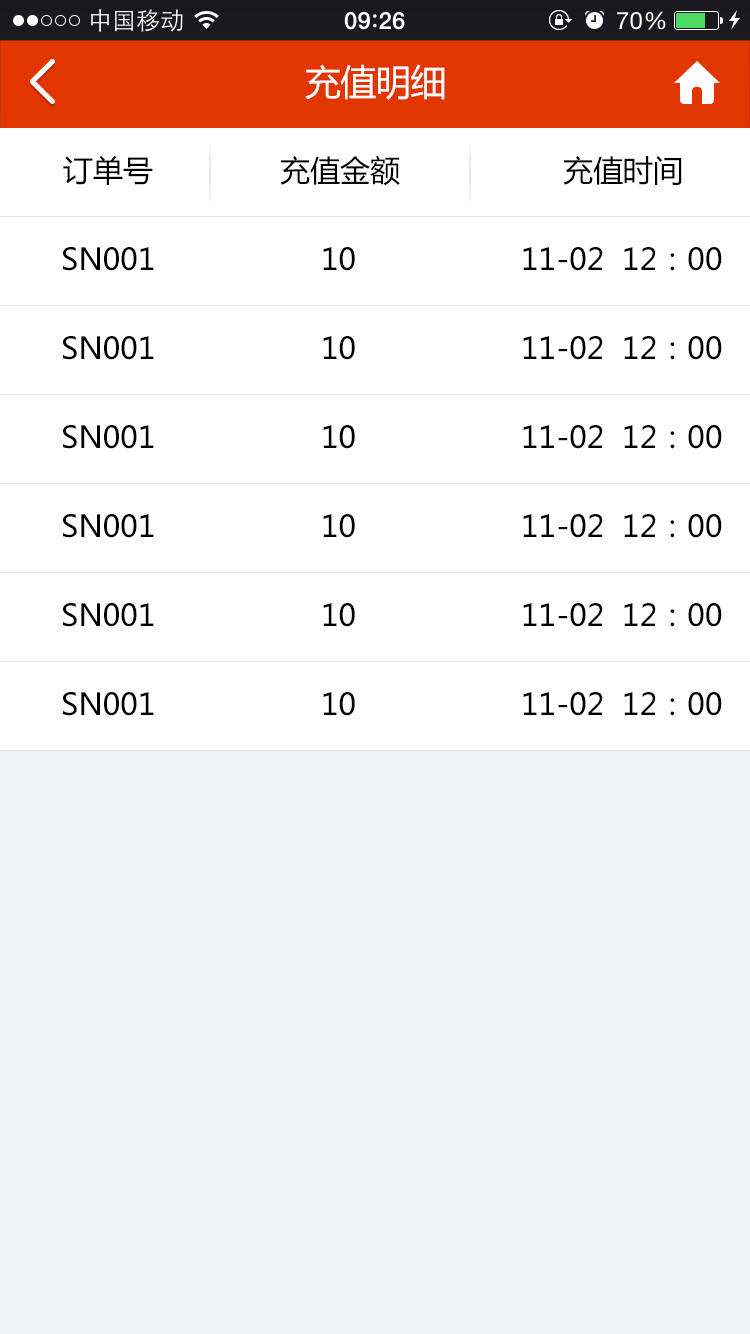
<style>
.page{position:relative;width:750px;height:1334px;background:#ffffff}
.page>*{position:absolute;margin:0}
.t1{font:36px "MicrosoftYaHei";letter-spacing:-0.025em;color:#ffffff}
.t2{font:30px "MicrosoftYaHei";color:#000000}
</style>
<div class="page">
<p class="t1" style="left:305px;top:64px;width:140px;height:36px">充值明细</p>
<p class="t2" style="left:63px;top:155px;width:90px;height:30px">订单号</p>
<p class="t2" style="left:280px;top:155px;width:120px;height:31px">充值金额</p>
<p class="t2" style="left:563px;top:156px;width:119px;height:29px">充值时间</p>
<p class="t2" style="left:63px;top:247px;width:91px;height:24px">SN001</p>
<p class="t2" style="left:323px;top:247px;width:32px;height:24px">10</p>
<p class="t2" style="left:523px;top:247px;width:199px;height:24px">11-02  12：00</p>
<p class="t2" style="left:63px;top:336px;width:91px;height:24px">SN001</p>
<p class="t2" style="left:323px;top:336px;width:32px;height:24px">10</p>
<p class="t2" style="left:523px;top:336px;width:199px;height:24px">11-02  12：00</p>
<p class="t2" style="left:63px;top:425px;width:91px;height:24px">SN001</p>
<p class="t2" style="left:323px;top:425px;width:32px;height:24px">10</p>
<p class="t2" style="left:523px;top:425px;width:199px;height:24px">11-02  12：00</p>
<p class="t2" style="left:63px;top:514px;width:91px;height:24px">SN001</p>
<p class="t2" style="left:323px;top:514px;width:32px;height:24px">10</p>
<p class="t2" style="left:523px;top:514px;width:199px;height:24px">11-02  12：00</p>
<p class="t2" style="left:63px;top:603px;width:91px;height:24px">SN001</p>
<p class="t2" style="left:323px;top:603px;width:32px;height:24px">10</p>
<p class="t2" style="left:523px;top:603px;width:199px;height:24px">11-02  12：00</p>
<p class="t2" style="left:63px;top:692px;width:91px;height:24px">SN001</p>
<p class="t2" style="left:323px;top:692px;width:32px;height:24px">10</p>
<p class="t2" style="left:523px;top:692px;width:199px;height:24px">11-02  12：00</p>
</div>
